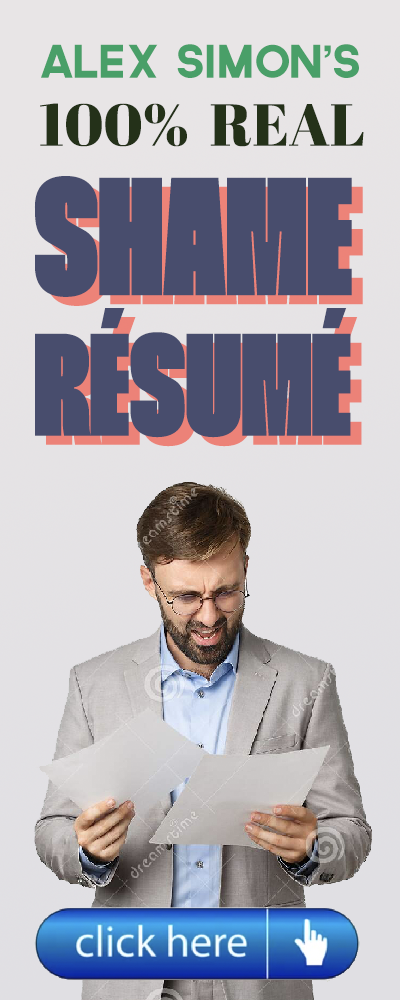
<style>
.page{position:relative;width:400px;height:1000px}
.page>*{position:absolute;margin:0}
.t1{font:44.9px "Governor";letter-spacing:-0.06em;color:#499f68}
.t2{font:44.9px "Helvetica-Bold";letter-spacing:-0.06em;color:#499f68}
.t3{font:59.2px "AbrilFatface-Regular";color:#243119}
.t4{font:145.5px/140.4px "Thunder-BlackLC";color:#484d6d}
.t5{font:167.5px/140.4px "Thunder-BlackLC";color:#484d6d}
</style>
<div class="page">
<p class="t1" style="left:41px;top:44px;width:318px;height:34px">ALEX SIMON<span class="t2">’</span>S</p>
<p class="t3" style="left:40px;top:103px;width:324px;height:44px">100%  REAL</p>
<p class="t4" style="left:34px;top:176px;width:318px;height:262px"><span class="t5">SHAME<br></span>RÉSUMÉ</p>
<p class="t4" style="left:45px;top:185px;width:318px;height:262px"><span class="t5">SHAME<br></span>RÉSUMÉ</p>
</div>
